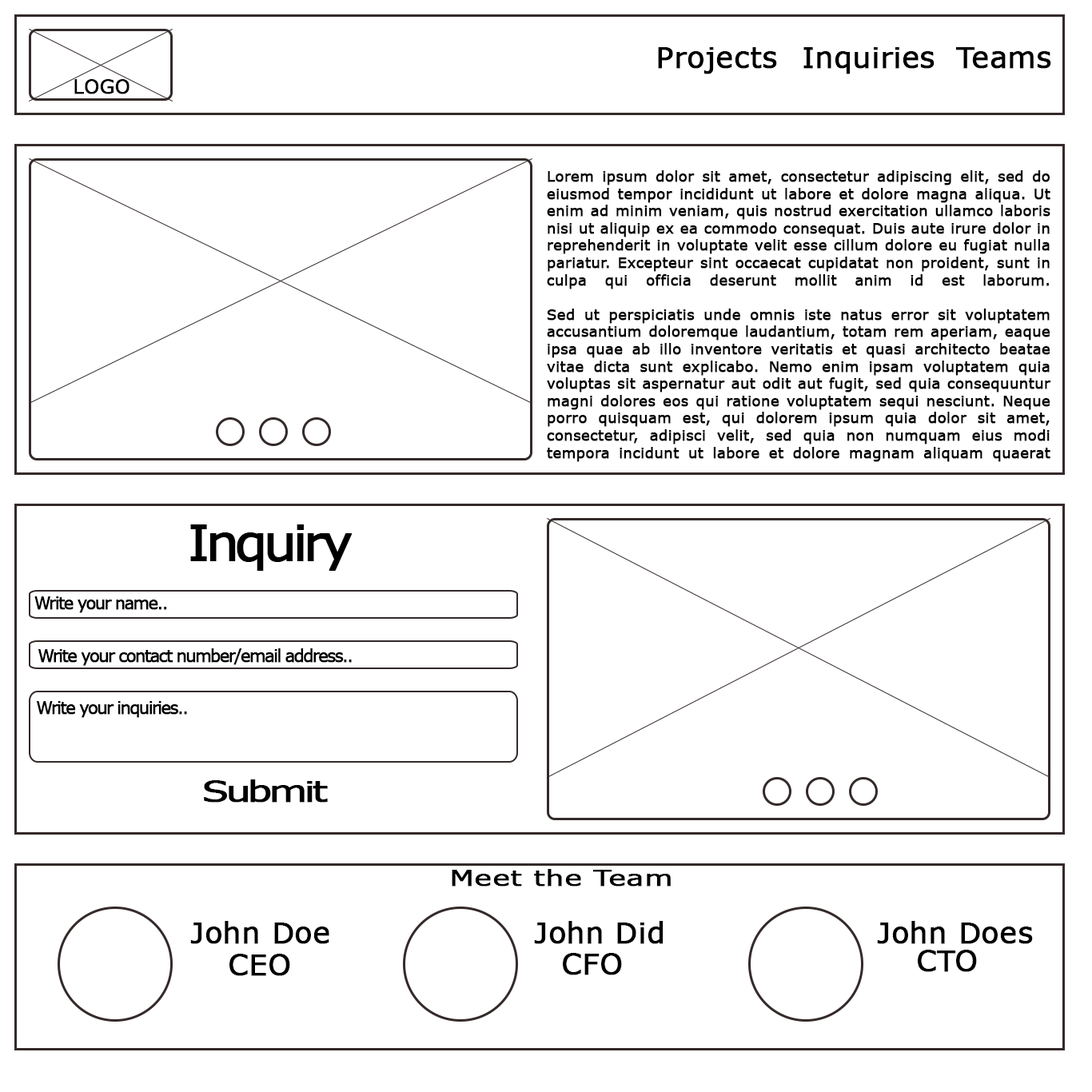
<style>
.page{position:relative;width:1092px;height:1092px;background:#ffffff}
.page>*{position:absolute;margin:0}
.t1{font:28.8px "Verdana";color:#000000;font-weight:bold}
.t2{font:19.2px "Verdana";color:#000000;font-weight:bold}
.t3{font:14.4px "Verdana";color:#000000;font-weight:bold}
.t4{font:49.3px "Verdana";letter-spacing:-0.1em;color:#000000;font-weight:bold;scale:1.06 1}
.t5{font:17.8px "Verdana";letter-spacing:-0.1em;color:#000000;font-weight:bold;scale:0.94 1}
.t6{font:28.8px "Verdana";letter-spacing:-0.1em;color:#000000;font-weight:bold;scale:1.35 1}
.t7{font:21.2px "Verdana";color:#000000;font-weight:bold;scale:1.35 1}
</style>
<div class="page">
<p class="t1" style="left:658px;top:47px;width:119px;height:27px">Projects</p>
<p class="t1" style="left:803px;top:47px;width:132px;height:27px">Inquiries</p>
<p class="t1" style="left:956px;top:47px;width:95px;height:22px">Teams</p>
<p class="t2" style="left:74px;top:79px;width:56px;height:15px">LOGO</p>
<p class="t3" style="left:547px;top:170px;width:504px;height:292px;text-align:justify">Lorem ipsum dolor sit amet, consectetur adipiscing elit, sed do eiusmod tempor incididunt ut labore et dolore magna aliqua. Ut enim ad minim veniam, quis nostrud exercitation ullamco laboris nisi ut aliquip ex ea commodo consequat. Duis aute irure dolor in reprehenderit in voluptate velit esse cillum dolore eu fugiat nulla pariatur. Excepteur sint occaecat cupidatat non proident, sunt in culpa qui officia deserunt mollit anim id est laborum.<br><br>Sed ut perspiciatis unde omnis iste natus error sit voluptatem accusantium doloremque laudantium, totam rem aperiam, eaque ipsa quae ab illo inventore veritatis et quasi architecto beatae vitae dicta sunt explicabo. Nemo enim ipsam voluptatem quia voluptas sit aspernatur aut odit aut fugit, sed quia consequuntur magni dolores eos qui ratione voluptatem sequi nesciunt. Neque porro quisquam est, qui dolorem ipsum quia dolor sit amet, consectetur, adipisci velit, sed quia non numquam eius modi tempora incidunt ut labore et dolore magnam aliquam quaerat voluptatem. Ut enim ad minima veniam, quis nostrum exercitationem ullam corporis suscipit laboriosam, nisi ut aliquid ex ea commodi consequatur? Quis autem vel eum iure reprehenderit qui in ea voluptate velit esse quam nihil molestiae consequatur, vel illum qui dolorem eum fugiat quo voluptas nulla pariatur?</p>
<p class="t4" style="left:190px;top:524px;width:163px;height:47px">Inquiry</p>
<p class="t5" style="left:34px;top:596px;width:133px;height:17px">Write your name..</p>
<p class="t5" style="left:38px;top:648px;width:314px;height:18px">Write your contact number/email address..</p>
<p class="t5" style="left:37px;top:701px;width:150px;height:17px">Write your inquiries..</p>
<p class="t6" style="left:204px;top:779px;width:124px;height:24px">Submit</p>
<p class="t7" style="left:452px;top:869px;width:219px;height:18px">Meet the Team</p>
<p class="t1" style="left:190px;top:921px;width:139px;height:23px">John Doe</p>
<p class="t1" style="left:534px;top:921px;width:130px;height:23px">John Did</p>
<p class="t1" style="left:877px;top:921px;width:156px;height:23px">John Does</p>
<p class="t1" style="left:229px;top:954px;width:61px;height:22px">CEO</p>
<p class="t1" style="left:563px;top:953px;width:59px;height:22px">CFO</p>
<p class="t1" style="left:918px;top:950px;width:59px;height:22px">CTO</p>
</div>
